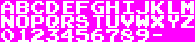
<style>
.page{position:relative;width:195px;height:42px;background:#ff00ff}
.page>*{position:absolute;margin:0}
.t1{font:15px "PressStartReg";color:#ffffff}
</style>
<div class="page">
<p class="t1" style="left:1px;top:1px;width:193px;height:13px">ABCDEFGHIJKLM</p>
<p class="t1" style="left:1px;top:15px;width:193px;height:13px">NOPQRSTUVWXYZ</p>
<p class="t1" style="left:1px;top:29px;width:161px;height:13px">0123456789-</p>
</div>
